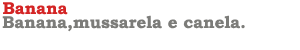
<style>
.page{position:relative;width:300px;height:50px;background:#ffffff}
.page>*{position:absolute;margin:0}
.t1{font:17px "BookmanOldStyle-Bold";color:#d42525}
.t2{font:17px "BookmanOldStyle-Bold";color:#7c7c79}
</style>
<div class="page">
<p class="t1" style="left:3px;top:2px;width:65px;height:13px">Banana</p>
<p class="t2" style="left:2px;top:15px;width:243px;height:17px">Banana,mussarela e canela.</p>
</div>
